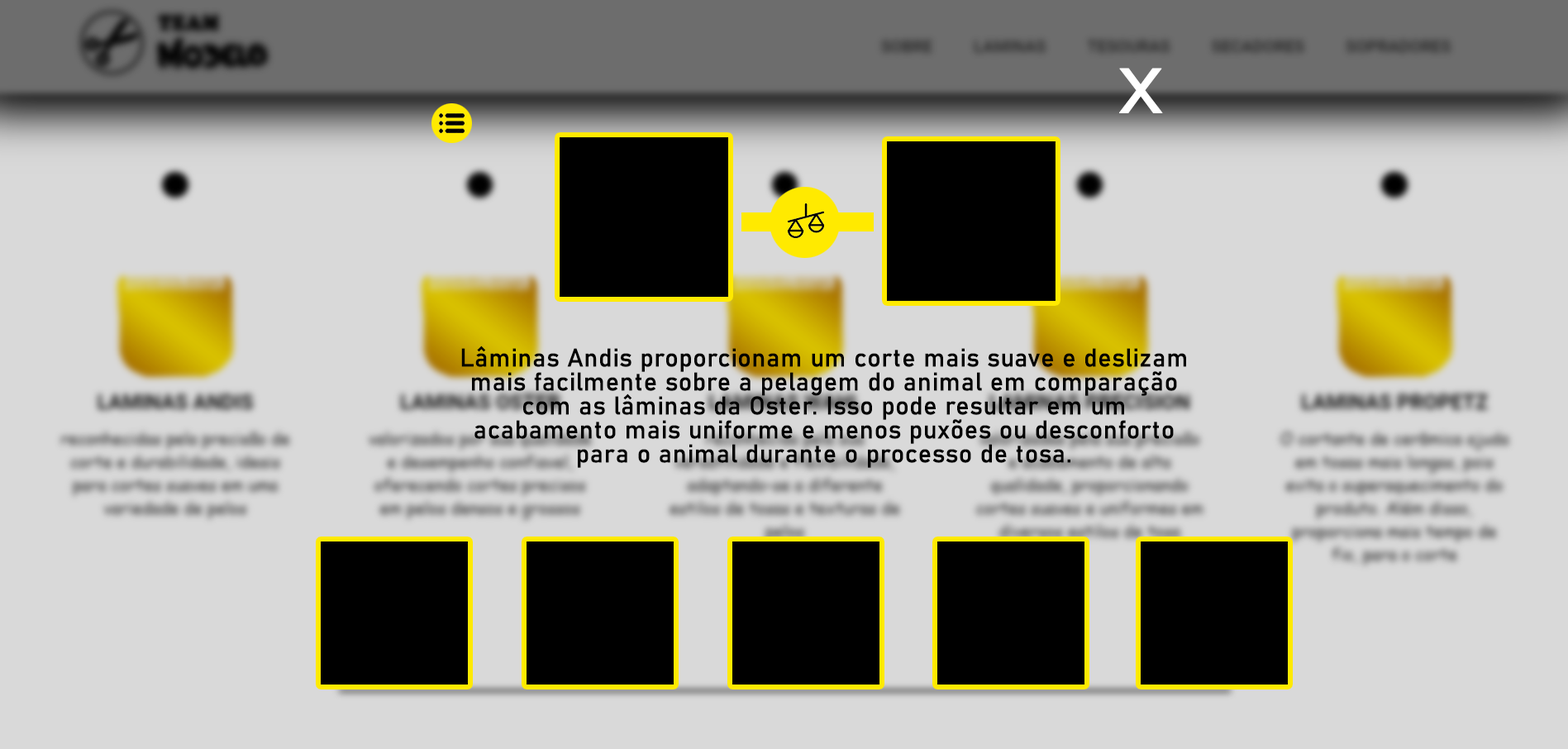
<style>
.page{position:relative;width:1568px;height:749px;background:#d9d9d9}
.page>*{position:absolute;margin:0}
.t1{font:62.4px "Bahnschrift";color:#ffffff;font-weight:bold;scale:1.25 1}
.t2{font:25px/24px "Bahnschrift";color:#000000;font-weight:bold}
</style>
<div class="page">
<p class="t1" style="left:1119px;top:68px;width:44px;height:45px">X</p>
<p class="t2" style="left:461px;top:346px;width:725px;height:122px;text-align:center">Lâminas Andis proporcionam um corte mais suave e deslizam mais facilmente sobre a pelagem do animal em comparação com as lâminas da Oster. Isso pode resultar em um acabamento mais uniforme e menos puxões ou desconforto para o animal durante o processo de tosa.</p>
</div>
